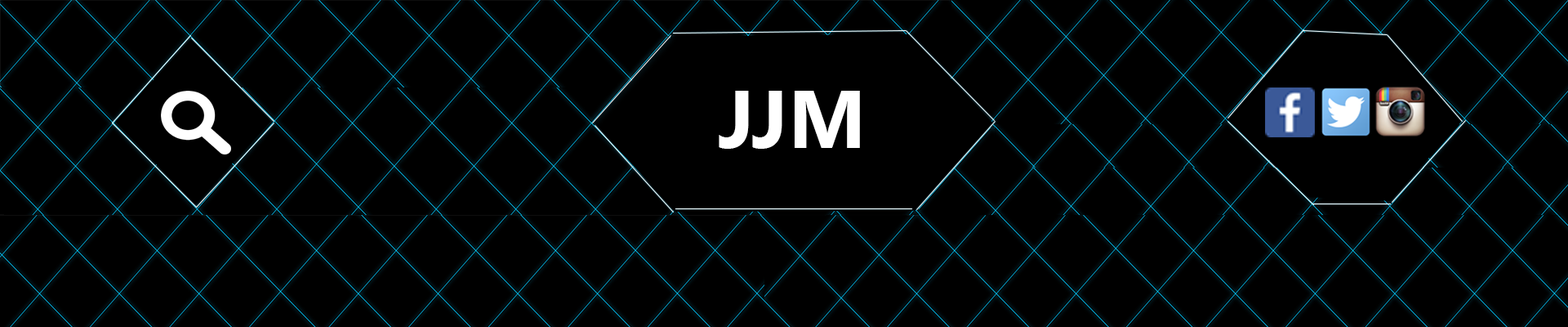
<style>
.page{position:relative;width:1568px;height:327px;background:#000000}
.page>*{position:absolute;margin:0}
.t1{font:81.7px "KhmerUI-Bold";color:#ffffff}
</style>
<div class="page">
<p class="t1" style="left:719px;top:91px;width:141px;height:58px">JJM</p>
</div>
